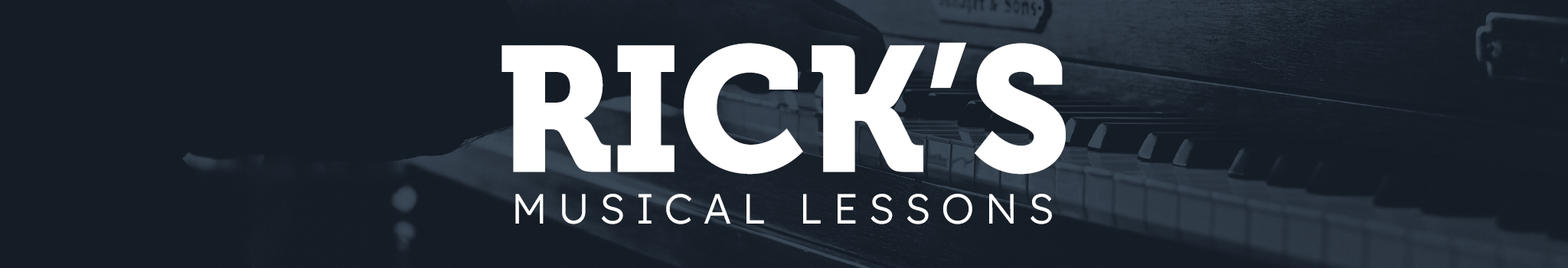
<style>
.page{position:relative;width:1568px;height:268px}
.page>*{position:absolute;margin:0}
.t1{font:176.7px "Museo-900";color:#ffffff}
.t2{font:42.1px "Lexend-Light";letter-spacing:0.25em;color:#ffffff}
</style>
<div class="page">
<p class="t1" style="left:501px;top:42px;width:565px;height:133px">RICK’S</p>
<p class="t2" style="left:515px;top:194px;width:537px;height:30px">MUSICAL LESSONS</p>
</div>
